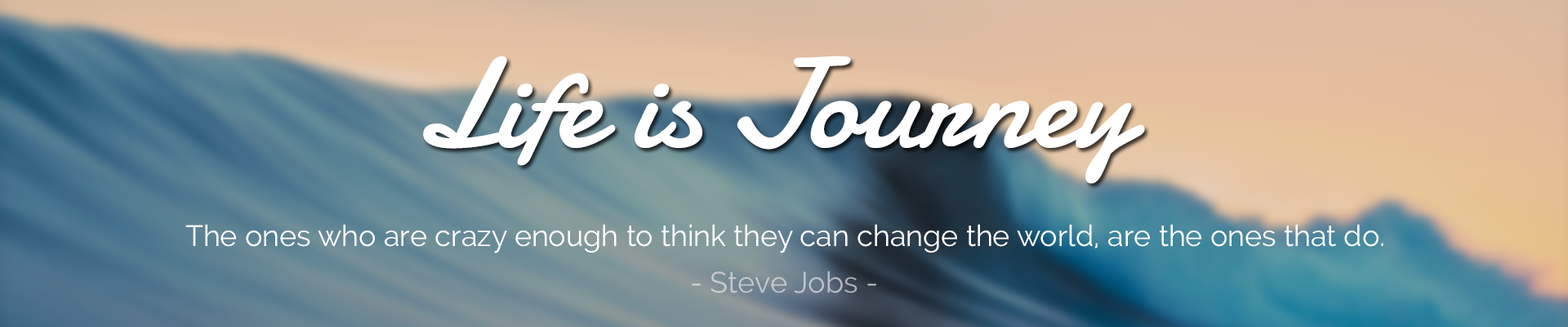
<style>
.page{position:relative;width:1568px;height:327px}
.page>*{position:absolute;margin:0}
.t1{font:127.5px "Damion";color:#ffffff}
.t2{font:29.4px "Raleway-Regular";color:#ffffff}
.t3{font:29.4px "Raleway-Regular";color:#bfc7cc}
</style>
<div class="page">
<p class="t1" style="left:423px;top:56px;width:722px;height:128px">Life is Journey</p>
<p class="t2" style="left:185px;top:224px;width:1198px;height:29px">The ones who are crazy enough to think they can change the world, are the ones that do.</p>
<p class="t3" style="left:692px;top:270px;width:184px;height:23px">- Steve Jobs -</p>
</div>
